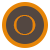
<style>
.page{position:relative;width:50px;height:50px;background:#534741}
.page>*{position:absolute;margin:0}
.t1{font:27.5px "PerpetuaTitlingMT-Light";color:#e78507}
</style>
<div class="page">
<p class="t1" style="left:13px;top:15px;width:23px;height:20px">O</p>
</div>
